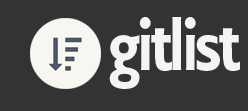
<style>
.page{position:relative;width:248px;height:111px;background:#333333}
.page>*{position:absolute;margin:0}
.t1{font:79.9px "Collegiate";letter-spacing:-0.025em;color:#f4f4f4}
</style>
<div class="page">
<p class="t1" style="left:109px;top:17px;width:131px;height:72px">gitlist</p>
</div>
